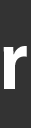
<style>
.page{position:relative;width:31px;height:128px;background:#333333}
.page>*{position:absolute;margin:0}
.t1{font:75px "AdobeGothicStd-Bold";color:#ffffff}
</style>
<div class="page">
<p class="t1" style="left:3px;top:46px;width:24px;height:43px">r</p>
</div>
